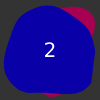
<style>
.page{position:relative;width:100px;height:100px;background:#0900a7}
.page>*{position:absolute;margin:0}
.t1{font:20px "DejaVuSans";color:#ffffff}
</style>
<div class="page">
<p class="t1" style="left:45px;top:42px;width:10px;height:15px">2</p>
</div>
